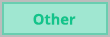
<style>
.page{position:relative;width:110px;height:37px;background:#a0e7d1}
.page>*{position:absolute;margin:0}
.t1{font:14.6px "OpenSans-Bold";color:#12c48b}
</style>
<div class="page">
<p class="t1" style="left:33px;top:13px;width:43px;height:12px">Other</p>
</div>
